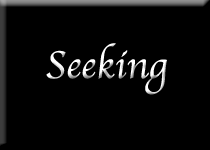
<style>
.page{position:relative;width:210px;height:150px;background:#000000}
.page>*{position:absolute;margin:0}
.t1{font:40px "Apple-Chancery"}
</style>
<div class="page">
<p class="t1" style="left:46px;top:43px;width:121px;height:52px">Seeking</p>
</div>
